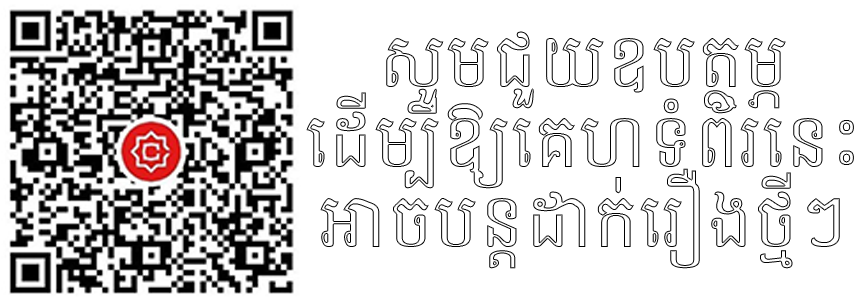
<style>
.page{position:relative;width:864px;height:300px;background:#ffffff}
.page>*{position:absolute;margin:0}
.t1{font:66.9px "KhmerOSbattambang"}
</style>
<div class="page">
<p class="t1" style="left:306px;top:31px;width:548px;height:238px;text-align:center">សូមជួយឧបត្ថម្ភ<br>ដើម្បីឱ្យគេហទំព័រនេះ<br>អាចបន្តដាក់រឿងថ្មីៗ</p>
</div>
